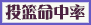
<style>
.page{position:relative;width:91px;height:25px;background:#f9faf3}
.page>*{position:absolute;margin:0}
.t1{font:16px "DFYaSongW9";color:#4d2241}
</style>
<div class="page">
<p class="t1" style="left:5px;top:4px;width:80px;height:16px">投篮命中率</p>
</div>
